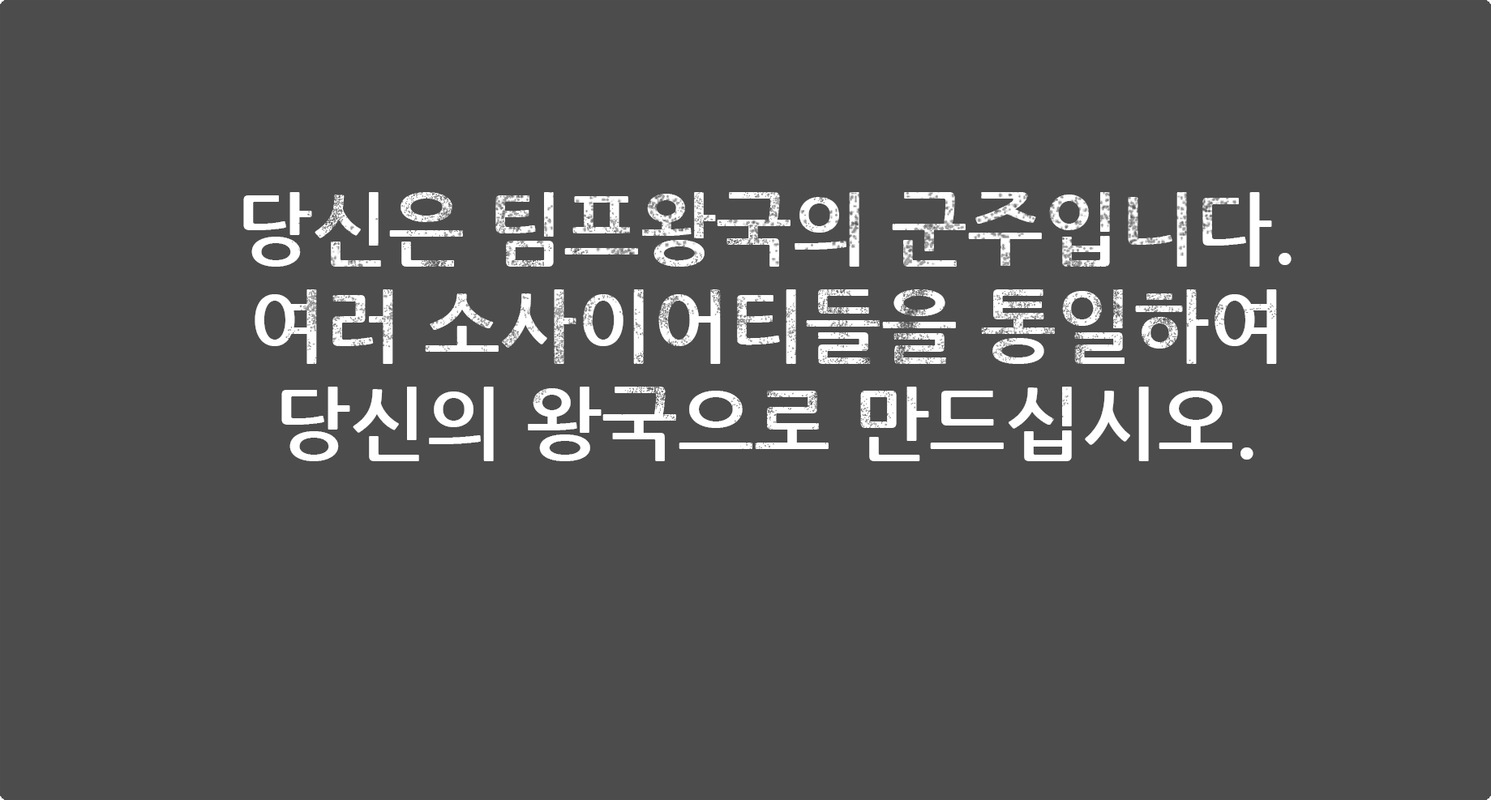
<style>
.page{position:relative;width:1491px;height:800px;background:#4c4c4c}
.page>*{position:absolute;margin:0}
.t1{font:81.1px "NanumGothicBold";color:#ffffff}
</style>
<div class="page">
<p class="t1" style="left:243px;top:192px;width:1048px;height:269px;text-align:center">당신은 팀프왕국의 군주입니다.<br>여러 소사이어티들을 통일하여 당신의 왕국으로 만드십시오.</p>
</div>
